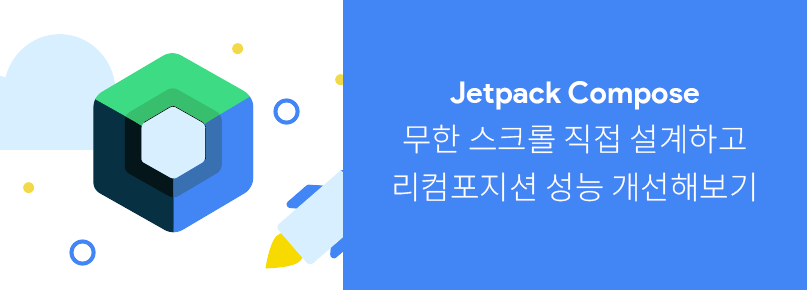
<style>
.page{position:relative;width:807px;height:290px;background:#4285f4}
.page>*{position:absolute;margin:0}
.t1{font:32px/48px "NotoSansKR-Light";color:#ffffff}
.t2{font:36px/48px "ProductSans-Bold";color:#ffffff}
.t3{font:30px/48px "ProductSans-Bold";color:#ffffff}
</style>
<div class="page">
<p class="t1" style="left:394px;top:81px;width:361px;height:121px;text-align:center"><span class="t2"><br></span><span class="t3">Jetpack Compose<br></span>무한 스크롤 직접 설계하고<br>리컴포지션 성능 개선해보기</p>
</div>
